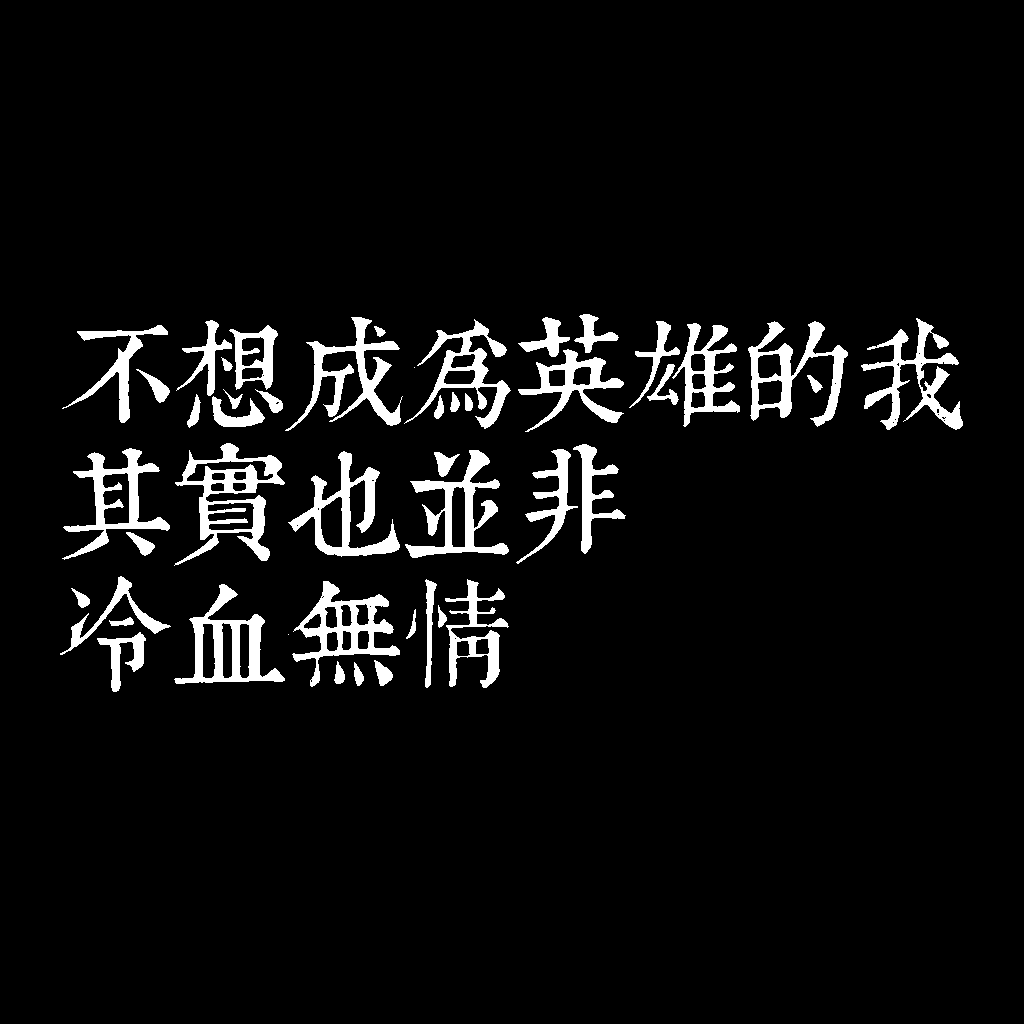
<style>
.page{position:relative;width:1024px;height:1024px;background:#000000}
.page>*{position:absolute;margin:0}
.t1{font:116px/130px "TpldKhangXiDictTrial";letter-spacing:-0.02em;color:#ffffff}
</style>
<div class="page">
<p class="t1" style="left:60px;top:314px;width:903px;height:378px">不想成為英雄的我<br>其實也並非<br>冷血無情</p>
</div>
